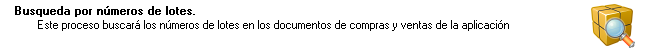
<style>
.page{position:relative;width:652px;height:52px;background:#ffffff}
.page>*{position:absolute;margin:0}
.t1{font:11.4px "MS Sans Serif";color:#000000;font-weight:bold}
.t2{font:11.4px "MS Sans Serif";color:#000000}
</style>
<div class="page">
<p class="t1" style="left:15px;top:6px;width:180px;height:11px">Busqueda por números de lotes.</p>
<p class="t2" style="left:38px;top:20px;width:471px;height:11px">Este proceso buscará los números de lotes en los documentos de compras y ventas de la aplicación</p>
</div>
